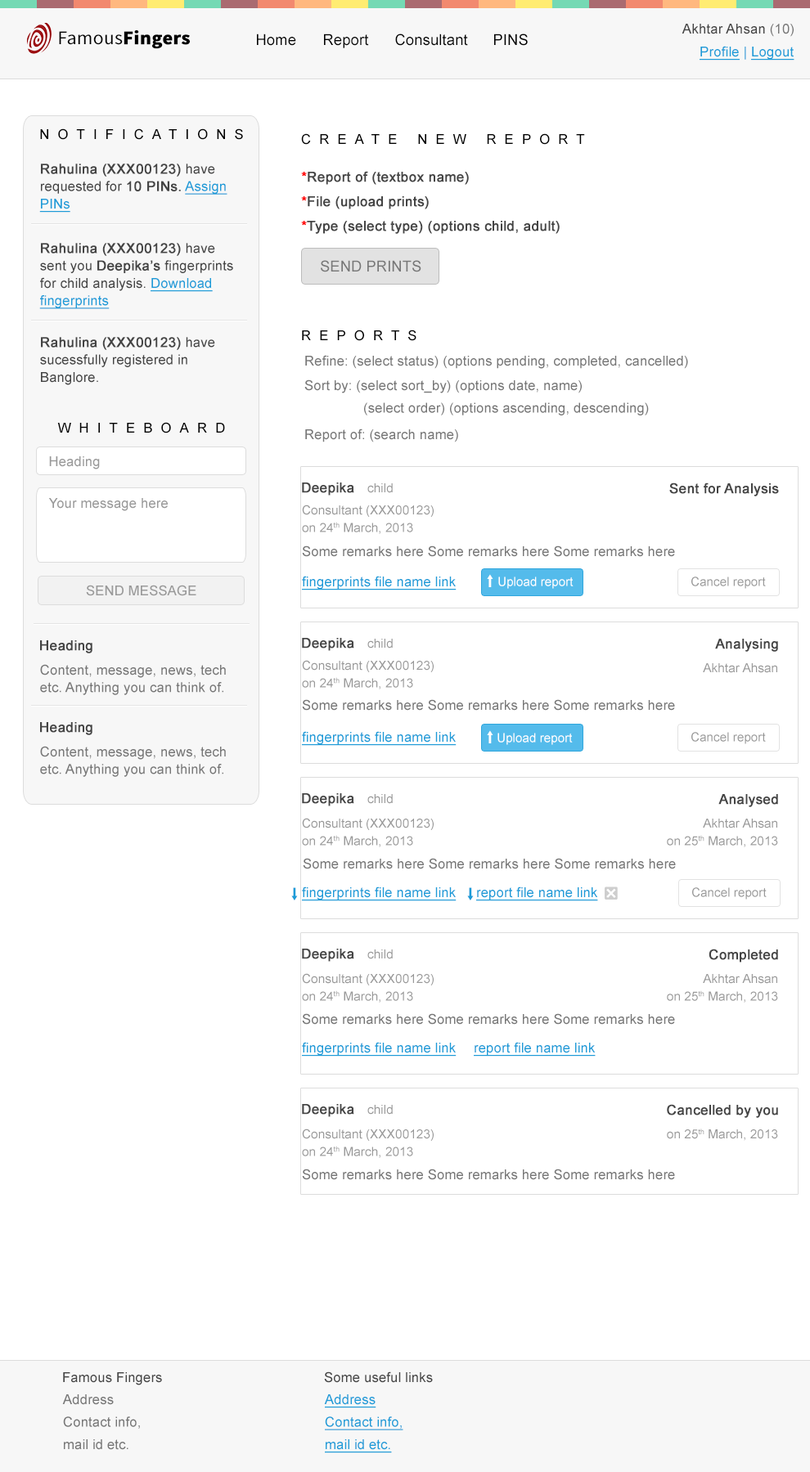
<style>
.page{position:relative;width:810px;height:1472px;background:#ffffff}
.page>*{position:absolute;margin:0}
.t1{font:13.7px "ArialMT";letter-spacing:0.01em;color:#444444}
.t2{font:13.7px "ArialMT";letter-spacing:0.01em;color:#777777}
.t3{font:19.2px "SourceSansPro-Bold";letter-spacing:0.01em;color:#000000;font-weight:bold}
.t4{font:19.2px "SourceSansPro-Regular";letter-spacing:0.01em;color:#000000}
.t5{font:9.8px "ArialMT";letter-spacing:0.01em;color:#000000}
.t6{font:9.8px "ArialMT";letter-spacing:0.01em;color:#000000;text-transform:uppercase}
.t7{font:13.7px "ArialMT";letter-spacing:0.01em;color:#1c9cd8;text-decoration:underline}
.t8{font:13.7px "ArialMT";letter-spacing:0.01em;color:#1c9cd8}
.t9{font:13.7px "ArialMT";letter-spacing:0.6em;color:#000000;text-transform:uppercase}
.t10{font:13.7px/17.5px "ArialMT";letter-spacing:0.005em;color:#444444;font-weight:bold}
.t11{font:13.7px/17.5px "ArialMT";letter-spacing:0.005em;color:#444444}
.t12{font:13.7px/17.5px "ArialMT";letter-spacing:0.005em;color:#1c9cd8;text-decoration:underline}
.t13{font:13.7px "ArialMT";letter-spacing:0.005em;color:#444444;font-weight:bold}
.t14{font:13.7px "ArialMT";letter-spacing:0.005em;color:#ff0000;font-weight:bold}
.t15{font:15px "ArialMT";letter-spacing:0.005em;color:#787878;text-transform:uppercase}
.t16{font:13.7px "ArialMT";letter-spacing:0.005em;color:#777777}
.t17{font:13.7px/22.5px "ArialMT";letter-spacing:0.005em;color:#777777}
.t18{font:13.7px "ArialMT";letter-spacing:0.005em;color:#999999}
.t19{font:12.5px "ArialMT";letter-spacing:0.005em;color:#999999}
.t20{font:12.5px/17.5px "ArialMT";letter-spacing:0.005em;color:#999999}
.t21{font:13.7px "ArialMT";letter-spacing:0.005em;color:#1c9cd8;text-decoration:underline}
.t22{font:12.5px "ArialMT";letter-spacing:0.005em;color:#ffffff}
.t23{font:13.7px "ArialMT";letter-spacing:0.005em;color:#999999;text-transform:uppercase}
.t24{font:13.7px/17.5px "ArialMT";letter-spacing:0.005em;color:#777777}
.t25{font:13.7px "ArialMT";letter-spacing:0.005em;color:#444444}
.t26{font:13.7px/22.5px "ArialMT";letter-spacing:0.005em;color:#1c9cd8;text-decoration:underline}
</style>
<div class="page">
<p class="t1" style="left:681px;top:24px;width:112px;height:13px">Akhtar Ahsan <span class="t2">(10)</span></p>
<p class="t3" style="left:59px;top:30px;width:131px;height:19px"><span class="t4">Famous</span>Fingers</p>
<p class="t5" style="left:257px;top:34px;width:39px;height:12px">Home</p>
<p class="t5" style="left:324px;top:34px;width:45px;height:14px">Report</p>
<p class="t5" style="left:395px;top:34px;width:73px;height:12px">Consultant</p>
<p class="t6" style="left:494px;top:34px;width:34px;height:12px">PINs</p>
<p class="t7" style="left:699px;top:46px;width:95px;height:15px">Profile<span class="t8"> | </span>Logout</p>
<p class="t9" style="left:40px;top:128px;width:203px;height:12px">Notifications</p>
<p class="t9" style="left:301px;top:133px;width:284px;height:12px">Create New Report</p>
<p class="t10" style="left:39px;top:164px;width:188px;height:49px">Rahulina (XXX00123)<span class="t11"> have requested for </span>10 PINs. <span class="t12">Assign PINs</span></p>
<p class="t13" style="left:301px;top:171px;width:168px;height:14px"><span class="t14">*</span>Report of (textbox name)</p>
<p class="t13" style="left:301px;top:196px;width:128px;height:13px"><span class="t14">*</span>File (upload prints)</p>
<p class="t13" style="left:301px;top:221px;width:259px;height:13px"><span class="t14">*</span>Type (select type) (options child, adult)</p>
<p class="t11" style="left:39px;top:243px;width:194px;height:66px"><span class="t10">Rahulina (XXX00123)</span> have sent you <span class="t10">Deepika’s </span>fingerprints for child analysis. <span class="t12">Download fingerprints</span></p>
<p class="t15" style="left:321px;top:260px;width:100px;height:12px">Send Prints</p>
<p class="t9" style="left:302px;top:330px;width:114px;height:11px">Reports</p>
<p class="t11" style="left:40px;top:337px;width:175px;height:48px"><span class="t10">Rahulina (XXX00123)</span> have sucessfully registered in Banglore.</p>
<p class="t16" style="left:305px;top:355px;width:383px;height:14px">Refine: (select status) (options pending, completed, cancelled)</p>
<p class="t17" style="left:304px;top:380px;width:345px;height:36px">Sort by: (select sort_by) (options date, name)<br>  (select order) (options ascending, descending)</p>
<p class="t9" style="left:57px;top:422px;width:168px;height:12px">Whiteboard</p>
<p class="t16" style="left:305px;top:429px;width:153px;height:14px">Report of: (search name)</p>
<p class="t18" style="left:49px;top:456px;width:51px;height:14px">Heading</p>
<p class="t13" style="left:302px;top:483px;width:52px;height:13px">Deepika</p>
<p class="t19" style="left:367px;top:483px;width:26px;height:10px">child</p>
<p class="t13" style="left:669px;top:483px;width:110px;height:14px">Sent for Analysis</p>
<p class="t18" style="left:48px;top:498px;width:120px;height:13px">Your message here</p>
<p class="t20" style="left:302px;top:505px;width:132px;height:29px">Consultant (XXX00123)<br>on 24th March, 2013</p>
<p class="t16" style="left:302px;top:546px;width:373px;height:11px">Some remarks here Some remarks here Some remarks here</p>
<p class="t21" style="left:302px;top:576px;width:154px;height:15px">fingerprints file name link</p>
<p class="t22" style="left:498px;top:577px;width:75px;height:12px">Upload report</p>
<p class="t19" style="left:691px;top:577px;width:75px;height:12px">Cancel report</p>
<p class="t23" style="left:86px;top:585px;width:110px;height:11px">Send message</p>
<p class="t13" style="left:40px;top:641px;width:52px;height:13px">Heading</p>
<p class="t13" style="left:302px;top:638px;width:52px;height:13px">Deepika</p>
<p class="t19" style="left:367px;top:639px;width:26px;height:10px">child</p>
<p class="t13" style="left:715px;top:639px;width:63px;height:13px">Analysing</p>
<p class="t24" style="left:40px;top:664px;width:186px;height:31px">Content, message, news, tech etc. Anything you can think of.</p>
<p class="t20" style="left:302px;top:660px;width:132px;height:30px">Consultant (XXX00123)<br>on 24th March, 2013</p>
<p class="t19" style="left:703px;top:663px;width:74px;height:10px">Akhtar Ahsan</p>
<p class="t16" style="left:302px;top:699px;width:373px;height:12px">Some remarks here Some remarks here Some remarks here</p>
<p class="t13" style="left:40px;top:722px;width:52px;height:13px">Heading</p>
<p class="t21" style="left:302px;top:731px;width:154px;height:15px">fingerprints file name link</p>
<p class="t22" style="left:497px;top:733px;width:76px;height:12px">Upload report</p>
<p class="t19" style="left:691px;top:732px;width:75px;height:12px">Cancel report</p>
<p class="t24" style="left:40px;top:746px;width:186px;height:31px">Content, message, news, tech etc. Anything you can think of.</p>
<p class="t13" style="left:302px;top:793px;width:52px;height:14px">Deepika</p>
<p class="t19" style="left:367px;top:794px;width:26px;height:10px">child</p>
<p class="t13" style="left:718px;top:794px;width:60px;height:13px">Analysed</p>
<p class="t20" style="left:302px;top:818px;width:132px;height:29px">Consultant (XXX00123)<br>on 24th March, 2013</p>
<p class="t20" style="left:667px;top:819px;width:111px;height:28px;text-align:right">Akhtar Ahsan<br>on 25th March, 2013</p>
<p class="t16" style="left:303px;top:858px;width:373px;height:12px">Some remarks here Some remarks here Some remarks here</p>
<p class="t21" style="left:302px;top:887px;width:154px;height:14px">fingerprints file name link</p>
<p class="t21" style="left:476px;top:887px;width:122px;height:14px">report file name link</p>
<p class="t19" style="left:692px;top:888px;width:74px;height:12px">Cancel report</p>
<p class="t13" style="left:302px;top:949px;width:52px;height:13px">Deepika</p>
<p class="t19" style="left:367px;top:950px;width:26px;height:10px">child</p>
<p class="t13" style="left:708px;top:949px;width:70px;height:14px">Completed</p>
<p class="t20" style="left:302px;top:973px;width:132px;height:30px">Consultant (XXX00123)<br>on 24th March, 2013</p>
<p class="t20" style="left:667px;top:974px;width:111px;height:29px;text-align:right">Akhtar Ahsan<br>on 25th March, 2013</p>
<p class="t16" style="left:302px;top:1014px;width:373px;height:11px">Some remarks here Some remarks here Some remarks here</p>
<p class="t21" style="left:302px;top:1042px;width:154px;height:15px">fingerprints file name link</p>
<p class="t21" style="left:474px;top:1042px;width:122px;height:15px">report file name link</p>
<p class="t13" style="left:302px;top:1104px;width:52px;height:13px">Deepika</p>
<p class="t19" style="left:367px;top:1105px;width:26px;height:10px">child</p>
<p class="t13" style="left:667px;top:1104px;width:111px;height:14px">Cancelled by you</p>
<p class="t20" style="left:302px;top:1129px;width:132px;height:29px">Consultant (XXX00123)<br>on 24th March, 2013</p>
<p class="t19" style="left:667px;top:1129px;width:111px;height:12px">on 25th March, 2013</p>
<p class="t16" style="left:302px;top:1169px;width:373px;height:11px">Some remarks here Some remarks here Some remarks here</p>
<p class="t25" style="left:63px;top:1373px;width:99px;height:13px">Famous Fingers</p>
<p class="t25" style="left:324px;top:1372px;width:109px;height:11px">Some useful links</p>
<p class="t17" style="left:62px;top:1395px;width:78px;height:55px">Address<br>Contact info,<br>mail id etc.</p>
<p class="t26" style="left:324px;top:1395px;width:79px;height:59px">Address<br>Contact info,<br>mail id etc.</p>
</div>
